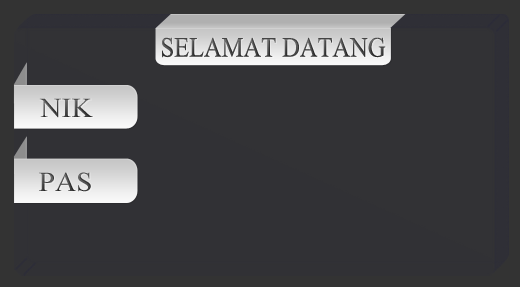
<style>
.page{position:relative;width:520px;height:287px;background:#323235}
.page>*{position:absolute;margin:0}
.t1{font:27.8px "TimesNewRomanPSMT";color:#444444;text-transform:uppercase;scale:0.88 1}
.t2{font:39.7px "TimesNewRomanPSMT";color:#474747;font-variant:small-caps;scale:1.06 1}
.t3{font:39.7px "TimesNewRomanPSMT";color:#4a4a4a;font-variant:small-caps;scale:1.06 1}
</style>
<div class="page">
<p class="t1" style="left:162px;top:37px;width:224px;height:21px">selamat datang</p>
<p class="t2" style="left:39px;top:98px;width:54px;height:20px">nik</p>
<p class="t3" style="left:39px;top:172px;width:52px;height:20px">pas</p>
</div>
